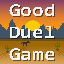
<style>
.page{position:relative;width:64px;height:64px}
.page>*{position:absolute;margin:0}
.t1{font:18px "Consolas-Bold";color:#f2f2f2;scale:1.15 1}
</style>
<div class="page">
<p class="t1" style="left:9px;top:4px;width:45px;height:56px;text-align:center">Good <br>Duel<br>Game</p>
</div>
